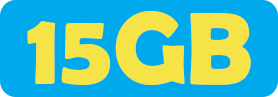
<style>
.page{position:relative;width:278px;height:97px;background:#00a8ec}
.page>*{position:absolute;margin:0}
.t1{font:104.2px "BerlinSansFBDemi-Bold";color:#f5e347}
</style>
<div class="page">
<p class="t1" style="left:27px;top:11px;width:224px;height:74px">15GB</p>
</div>
